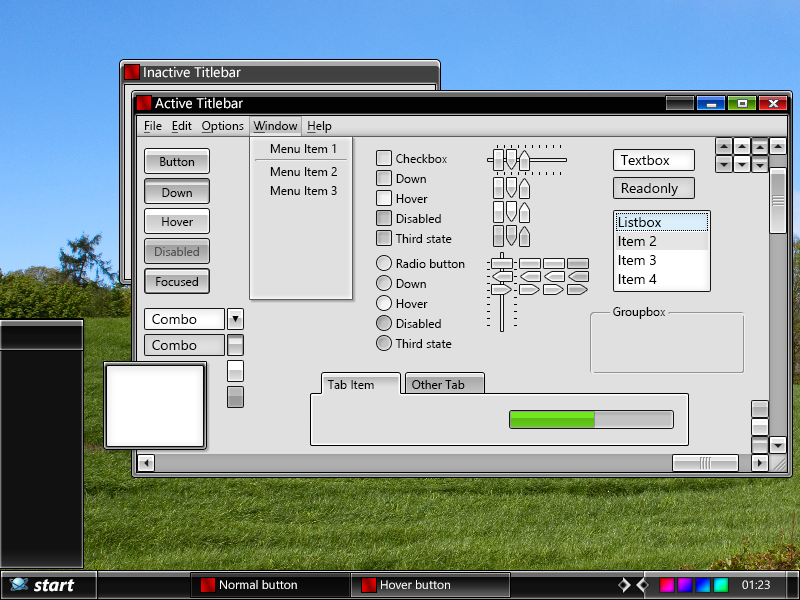
<style>
.page{position:relative;width:800px;height:600px;background:#e0e0e0}
.page>*{position:absolute;margin:0}
.t1{font:14px "SegoeUI";color:#ffffff}
.t2{font:12px "SegoeUI";color:#000000}
.t3{font:12px "SegoeUI";color:#000000;text-decoration:underline}
.t4{font:14px "SegoeUI";color:#000000}
.t5{font:12px "SegoeUI";color:#525252}
.t6{font:9px "ArialMT";color:#000000}
.t7{font:18px "SegoeUI-BoldItalic";color:#ffffff}
.t8{font:12px "SegoeUI";color:#ffffff}
</style>
<div class="page">
<p class="t1" style="left:144px;top:66px;width:97px;height:12px">Inactive Titlebar</p>
<p class="t1" style="left:155px;top:97px;width:88px;height:12px">Active Titlebar</p>
<p class="t2" style="left:144px;top:121px;width:188px;height:12px"><span class="t3">F</span>ile   <span class="t3">E</span>dit   <span class="t3">O</span>ptions   <span class="t3">W</span>indow   <span class="t3">H</span>elp</p>
<p class="t2" style="left:270px;top:144px;width:66px;height:9px">Menu Item 1</p>
<p class="t2" style="left:160px;top:157px;width:35px;height:9px">Button</p>
<p class="t2" style="left:396px;top:154px;width:51px;height:9px">Checkbox</p>
<p class="t4" style="left:620px;top:155px;width:50px;height:10px">Textbox</p>
<p class="t2" style="left:270px;top:167px;width:67px;height:9px">Menu Item 2</p>
<p class="t2" style="left:396px;top:174px;width:30px;height:9px">Down</p>
<p class="t4" style="left:621px;top:183px;width:57px;height:13px">Readonly</p>
<p class="t2" style="left:162px;top:188px;width:30px;height:9px">Down</p>
<p class="t2" style="left:270px;top:186px;width:67px;height:9px">Menu Item 3</p>
<p class="t2" style="left:396px;top:194px;width:32px;height:9px">Hover</p>
<p class="t2" style="left:162px;top:217px;width:31px;height:9px">Hover</p>
<p class="t2" style="left:396px;top:214px;width:45px;height:9px">Disabled</p>
<p class="t4" style="left:618px;top:217px;width:43px;height:10px">Listbox</p>
<p class="t2" style="left:395px;top:234px;width:57px;height:9px">Third state</p>
<p class="t4" style="left:618px;top:236px;width:39px;height:10px">Item 2</p>
<p class="t5" style="left:155px;top:247px;width:44px;height:9px">Disabled</p>
<p class="t4" style="left:618px;top:255px;width:38px;height:10px">Item 3</p>
<p class="t2" style="left:396px;top:259px;width:69px;height:9px">Radio button</p>
<p class="t2" style="left:156px;top:277px;width:42px;height:9px">Focused</p>
<p class="t2" style="left:396px;top:279px;width:30px;height:9px">Down</p>
<p class="t4" style="left:618px;top:274px;width:39px;height:10px">Item 4</p>
<p class="t2" style="left:396px;top:299px;width:32px;height:9px">Hover</p>
<p class="t4" style="left:152px;top:314px;width:45px;height:10px">Combo</p>
<p class="t6" style="left:232px;top:316px;width:7px;height:6px">▼</p>
<p class="t2" style="left:613px;top:307px;width:53px;height:12px">Groupbox</p>
<p class="t2" style="left:396px;top:319px;width:45px;height:9px">Disabled</p>
<p class="t4" style="left:152px;top:340px;width:45px;height:10px">Combo</p>
<p class="t2" style="left:395px;top:339px;width:57px;height:9px">Third state</p>
<p class="t2" style="left:327px;top:380px;width:47px;height:9px">Tab Item</p>
<p class="t2" style="left:412px;top:380px;width:53px;height:9px">Other Tab</p>
<p class="t7" style="left:34px;top:579px;width:41px;height:13px">start</p>
<p class="t8" style="left:220px;top:580px;width:77px;height:9px">Normal button</p>
<p class="t8" style="left:381px;top:580px;width:69px;height:9px">Hover button</p>
<p class="t8" style="left:742px;top:580px;width:28px;height:9px">01:23</p>
</div>
